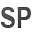
<style>
.page{position:relative;width:32px;height:32px;background:#ffffff}
.page>*{position:absolute;margin:0}
.t1{font:28.8px "Arial-BoldMT";color:#444343;scale:0.83 1}
</style>
<div class="page">
<p class="t1" style="left:0px;top:7px;width:31px;height:21px">SP</p>
</div>
